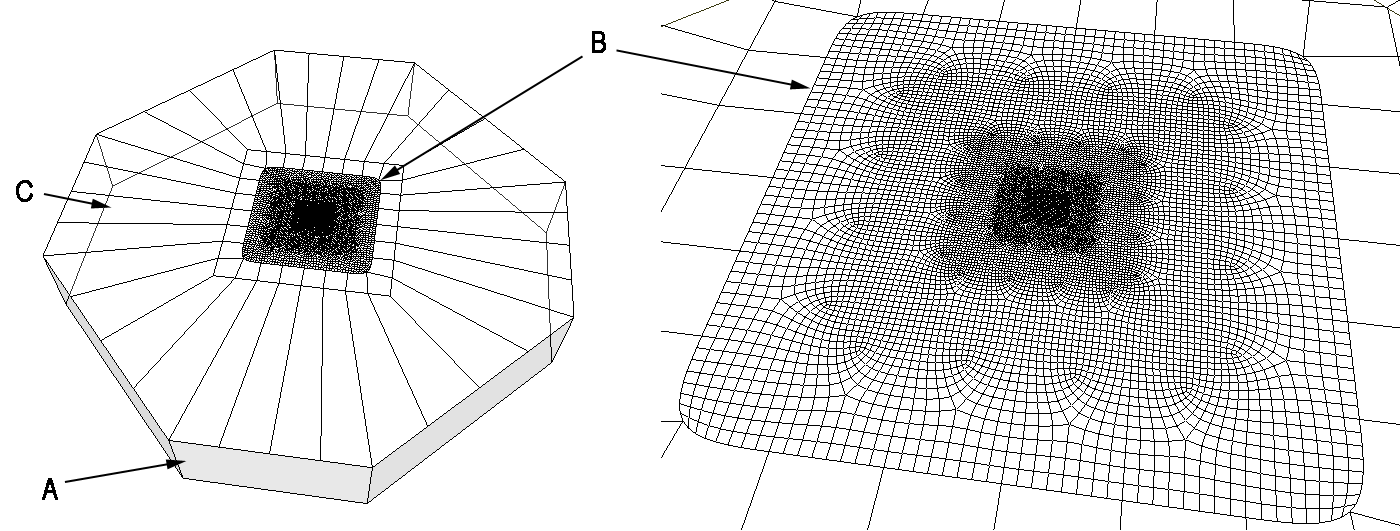
<style>
.page{position:relative;width:1400px;height:531px;background:#ffffff}
.page>*{position:absolute;margin:0}
.t1{font:30px "ArialNarrow";letter-spacing:0.05em;color:#000000;font-weight:bold}
</style>
<div class="page">
<p class="t1" style="left:592px;top:31px;width:14px;height:22px">B</p>
<p class="t1" style="left:16px;top:180px;width:17px;height:22px">C</p>
<p class="t1" style="left:42px;top:478px;width:16px;height:22px">A</p>
</div>
